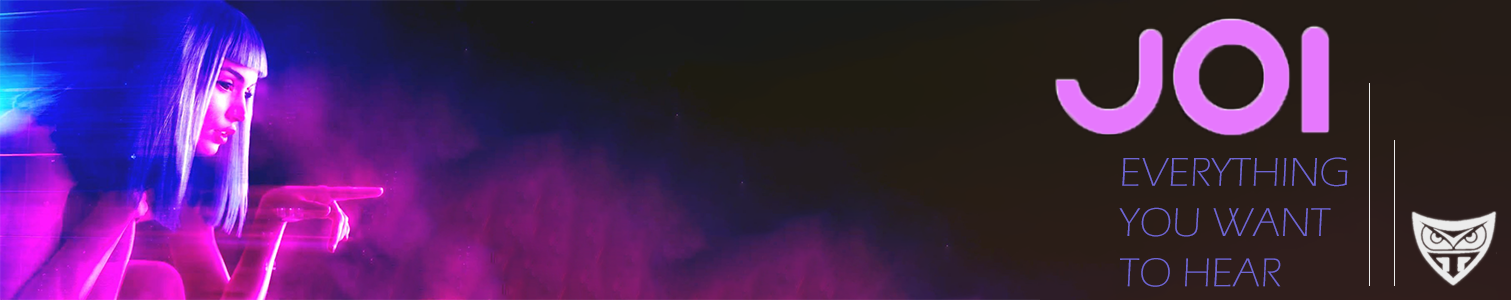
<style>
.page{position:relative;width:1511px;height:300px}
.page>*{position:absolute;margin:0}
.t1{font:41.9px "ErasITC-Light";color:#6f66d2}
.t2{font:139.6px "Verdana-BoldItalic";color:#cb13d3}
</style>
<div class="page">
<p class="t1" style="left:1119px;top:157px;width:229px;height:130px"><span class="t2"><br> </span>EVERYTHING<br> YOU WANT<br> TO HEAR</p>
</div>
